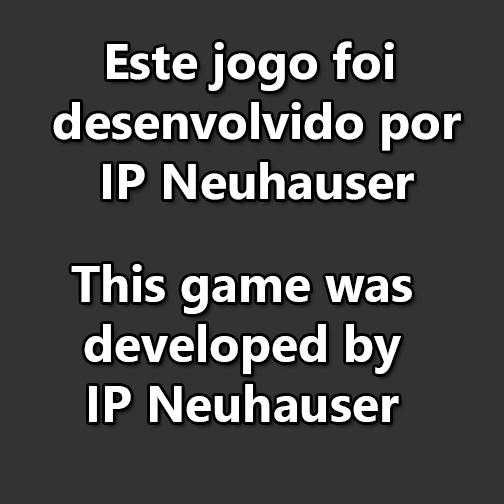
<style>
.page{position:relative;width:504px;height:504px;background:#333333}
.page>*{position:absolute;margin:0}
.t1{font:50px "SegoeUI-Bold";color:#ffffff}
</style>
<div class="page">
<p class="t1" style="left:53px;top:41px;width:408px;height:159px;text-align:center">Este jogo foi <br>desenvolvido por<br>IP Neuhauser</p>
<p class="t1" style="left:71px;top:264px;width:341px;height:158px;text-align:center">This game was<br>developed by<br>IP Neuhauser</p>
</div>
